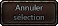
<style>
.page{position:relative;width:58px;height:26px}
.page>*{position:absolute;margin:0}
.t1{font:8px "LaoUI";color:#939393}
</style>
<div class="page">
<p class="t1" style="left:13px;top:4px;width:31px;height:16px;text-align:center">Annuler<br>sélection</p>
</div>
